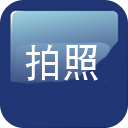
<style>
.page{position:relative;width:128px;height:128px;background:#213674}
.page>*{position:absolute;margin:0}
.t1{font:37.5px "SIL-Hei-Med-Jian";color:#fffcfe}
</style>
<div class="page">
<p class="t1" style="left:25px;top:44px;width:73px;height:37px">拍照</p>
</div>
